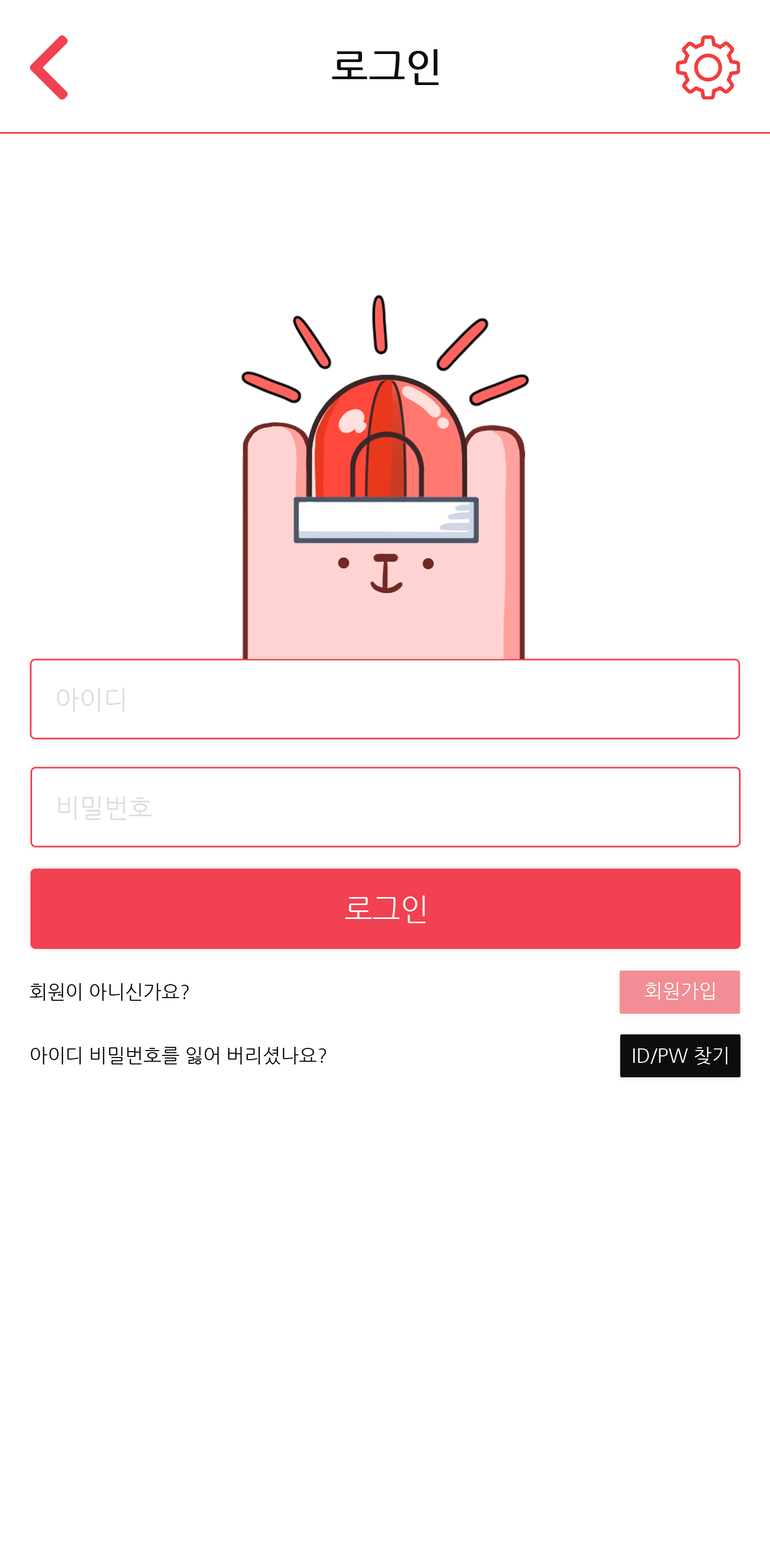
<style>
.page{position:relative;width:770px;height:1548px;background:#ffffff}
.page>*{position:absolute;margin:0}
.t1{font:38.5px "NanumGothic";color:#0d0d0d;font-weight:bold}
.t2{font:25.7px "NanumGothic";color:#dddddd}
.t3{font:30px "NanumGothic";color:#ffffff}
.t4{font:19.3px "NanumGothic";color:#0d0d0d}
.t5{font:19.3px "NanumGothic";color:#ffffff}
</style>
<div class="page">
<p class="t1" style="left:332px;top:49px;width:107px;height:36px">로그인</p>
<p class="t2" style="left:57px;top:688px;width:68px;height:24px">아이디</p>
<p class="t2" style="left:58px;top:796px;width:94px;height:24px">비밀번호</p>
<p class="t3" style="left:345px;top:895px;width:81px;height:28px">로그인</p>
<p class="t4" style="left:30px;top:983px;width:159px;height:18px">회원이 아니신가요?</p>
<p class="t5" style="left:645px;top:982px;width:70px;height:18px">회원가입</p>
<p class="t4" style="left:30px;top:1047px;width:296px;height:17px">아이디 비밀번호를 잃어 버리셨나요?</p>
<p class="t5" style="left:633px;top:1047px;width:94px;height:18px">ID/PW 찾기</p>
</div>
